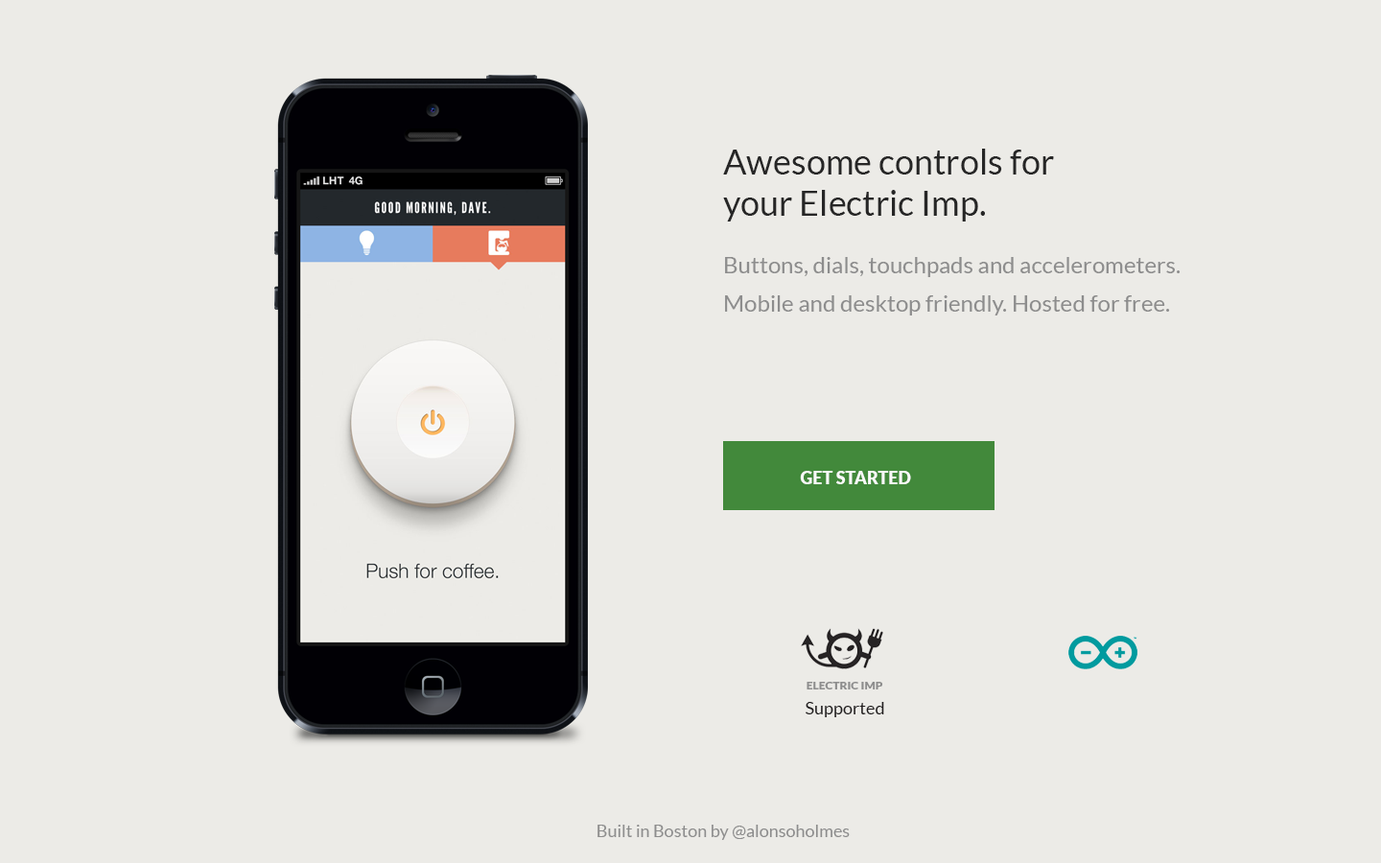
<style>
.page{position:relative;width:1381px;height:863px;background:#ecebe7}
.page>*{position:absolute;margin:0}
.t1{font:34.5px "Lato-Regular";color:#262626}
.t2{font:23px "Lato-Regular";color:#8d8d8d}
.t3{font:17.3px "Lato-Black";color:#f9f9f9}
.t4{font:11.5px "Lato-Black";color:#8d8d8d}
.t5{font:17.3px "Lato-Regular";color:#201d1e}
.t6{font:17.3px "Lato-Regular";color:#8d8d8d}
</style>
<div class="page">
<p class="t1" style="left:723px;top:149px;width:331px;height:73px">Awesome controls for <br>your Electric Imp.</p>
<p class="t2" style="left:725px;top:257px;width:456px;height:20px">Buttons, dials, touchpads and accelerometers.</p>
<p class="t2" style="left:725px;top:295px;width:445px;height:21px">Mobile and desktop friendly. Hosted for free.</p>
<p class="t3" style="left:800px;top:471px;width:111px;height:13px">GET STARTED</p>
<p class="t4" style="left:807px;top:682px;width:76px;height:8px">ELECTRIC IMP</p>
<p class="t5" style="left:806px;top:702px;width:78px;height:15px">Supported</p>
<p class="t6" style="left:598px;top:825px;width:252px;height:15px">Built in Boston by @alonsoholmes</p>
</div>
